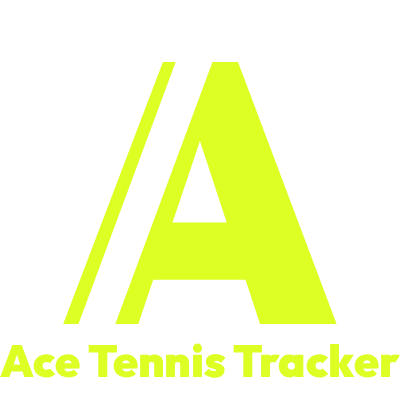
<style>
.page{position:relative;width:400px;height:400px;background:#ffffff}
.page>*{position:absolute;margin:0}
.t1{font:45px "Outfit-Black";color:#deff24}
</style>
<div class="page">
<p class="t1" style="left:0px;top:343px;width:400px;height:35px">Ace Tennis Tracker</p>
</div>
